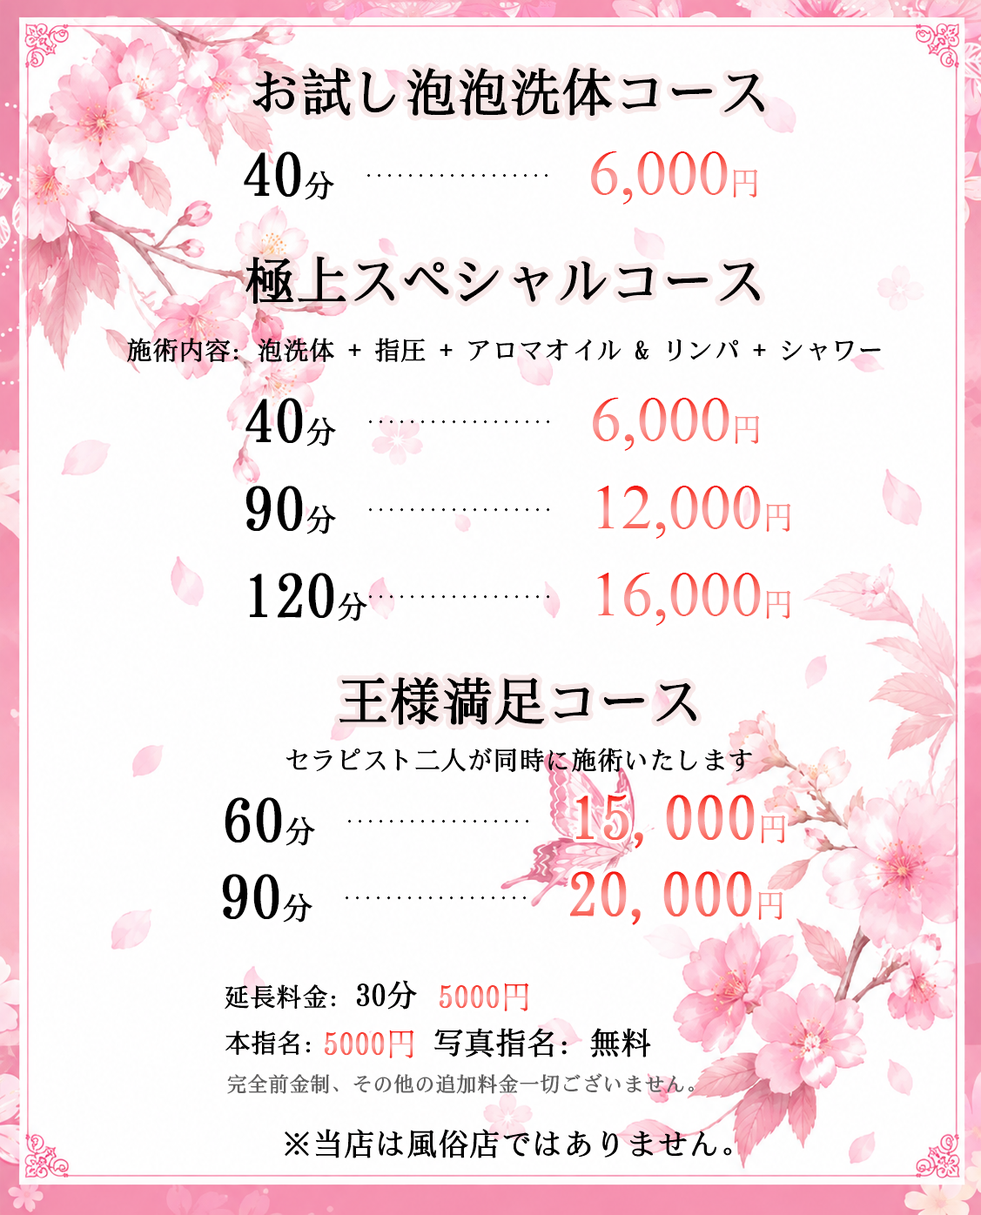
<style>
.page{position:relative;width:981px;height:1215px;background:#fefefe}
.page>*{position:absolute;margin:0}
.t1{font:52.2px "SimSong-Bold";color:#000000}
.t2{font:62.7px "SimSong-Bold";color:#000000}
.t3{font:31.3px "SimSong-Bold";color:#000000}
.t4{font:62.7px "TimesNewRomanPSMT"}
.t5{font:31.3px "SimSong-Regular"}
.t6{font:20.9px "SimSong-Regular";color:#000000}
.t7{font:26.1px "SimSong-Bold";color:#000000}
.t8{font:62.7px "SimSong-Bold"}
.t9{font:31.3px "SimSong-Bold"}
.t10{font:20.9px "SimSong-Bold";color:#5f5e5e}
</style>
<div class="page">
<p class="t1" style="left:252px;top:67px;width:512px;height:49px">お試し泡泡洗体コース</p>
<p class="t2" style="left:244px;top:151px;width:90px;height:49px">40<span class="t3">分</span></p>
<p class="t4" style="left:591px;top:151px;width:166px;height:54px">6,000<span class="t5">円</span></p>
<p class="t6" style="left:367px;top:174px;width:181px;height:4px">..................</p>
<p class="t1" style="left:246px;top:256px;width:514px;height:48px">極上スペシャルコース</p>
<p class="t7" style="left:127px;top:338px;width:754px;height:24px">施術内容：泡洗体 + 指圧 + アロマオイル &amp; リンパ + シャワー</p>
<p class="t2" style="left:246px;top:398px;width:90px;height:49px">40<span class="t3">分</span></p>
<p class="t4" style="left:593px;top:398px;width:166px;height:53px">6,000<span class="t5">円</span></p>
<p class="t6" style="left:369px;top:420px;width:181px;height:4px">..................</p>
<p class="t2" style="left:246px;top:486px;width:90px;height:49px">90<span class="t3">分</span></p>
<p class="t4" style="left:597px;top:486px;width:193px;height:53px">12,000<span class="t5">円</span></p>
<p class="t6" style="left:369px;top:508px;width:181px;height:4px">..................</p>
<p class="t2" style="left:250px;top:573px;width:117px;height:49px">120<span class="t3">分</span></p>
<p class="t4" style="left:597px;top:573px;width:193px;height:53px">16,000<span class="t5">円</span></p>
<p class="t6" style="left:369px;top:595px;width:181px;height:4px">..................</p>
<p class="t1" style="left:340px;top:677px;width:356px;height:48px">王様満足コース</p>
<p class="t7" style="left:286px;top:748px;width:466px;height:24px">セラピスト二人が同時に施術いたします</p>
<p class="t2" style="left:225px;top:797px;width:90px;height:49px">60<span class="t3">分</span></p>
<p class="t8" style="left:576px;top:795px;width:209px;height:54px">15,000<span class="t5">円</span></p>
<p class="t6" style="left:348px;top:820px;width:181px;height:4px">..................</p>
<p class="t2" style="left:222px;top:874px;width:91px;height:49px">90<span class="t3">分</span></p>
<p class="t8" style="left:570px;top:871px;width:213px;height:54px">20,000<span class="t5">円</span></p>
<p class="t6" style="left:346px;top:897px;width:181px;height:3px">..................</p>
<p class="t7" style="left:225px;top:980px;width:192px;height:30px">延長料金：<span class="t3">30分</span></p>
<p class="t9" style="left:439px;top:983px;width:89px;height:29px">5000<span class="t5">円</span></p>
<p class="t7" style="left:225px;top:1031px;width:86px;height:24px">本指名：</p>
<p class="t9" style="left:324px;top:1030px;width:90px;height:29px">5000<span class="t5">円</span></p>
<p class="t3" style="left:434px;top:1028px;width:217px;height:30px">写真指名：無料</p>
<p class="t10" style="left:227px;top:1073px;width:467px;height:21px">完全前金制、その他の追加料金一切ございません。</p>
<p class="t3" style="left:285px;top:1129px;width:447px;height:30px">※当店は風俗店ではありません。</p>
</div>
